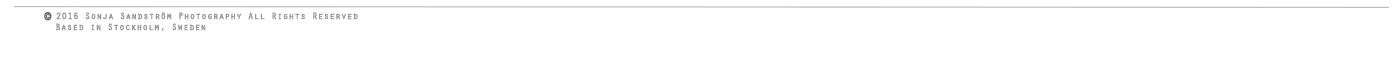
<style>
.page{position:relative;width:1400px;height:60px;background:#ffffff}
.page>*{position:absolute;margin:0}
.t1{font:11px "Orator-Regular";color:#666666;font-weight:bold}
.t2{font:9px "Orator-Regular";color:#999999;font-weight:bold}
</style>
<div class="page">
<p class="t1" style="left:44px;top:12px;width:8px;height:9px">©</p>
<p class="t2" style="left:56px;top:12px;width:302px;height:8px">Sonja Sandström Photography All Rights Reserved 2016</p>
<p class="t2" style="left:56px;top:23px;width:150px;height:8px">Based in Stockholm, Sweden</p>
</div>
